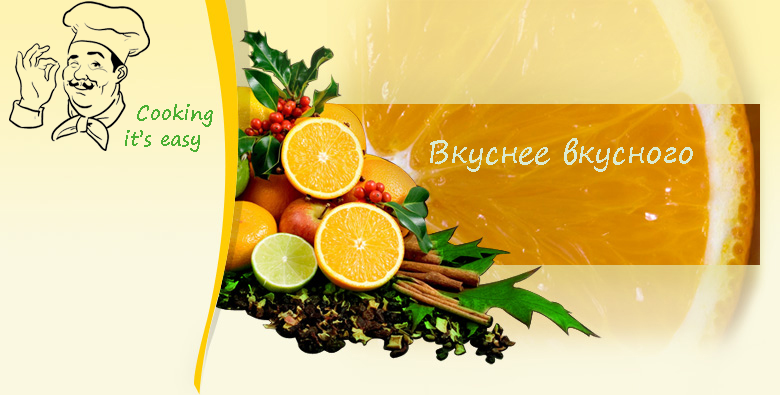
<style>
.page{position:relative;width:780px;height:395px}
.page>*{position:absolute;margin:0}
.t1{font:20px "SegoePrint-Bold";color:#4aaf32}
</style>
<div class="page">
<p class="t1" style="left:137px;top:104px;width:76px;height:23px">Cooking</p>
<p class="t1" style="left:125px;top:130px;width:75px;height:22px">it’s easy</p>
</div>
